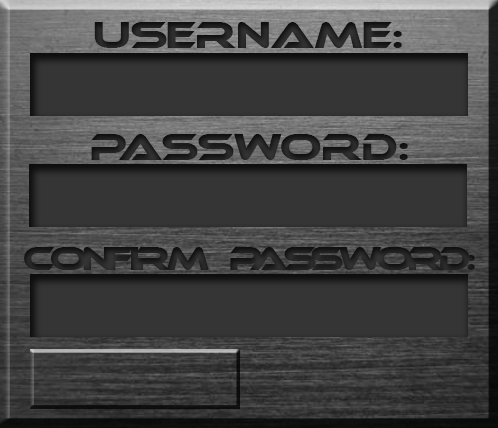
<style>
.page{position:relative;width:498px;height:428px;background:#353535}
.page>*{position:absolute;margin:0}
.t1{font:36px "Ethnocentric";color:#353535}
.t2{font:36px "Ethnocentric";color:#202020}
.t3{font:32px "Ethnocentric";letter-spacing:-0.15em;color:#353535}
</style>
<div class="page">
<p class="t1" style="left:94px;top:22px;width:308px;height:26px">USERNAME:</p>
<p class="t2" style="left:91px;top:134px;width:317px;height:26px">PASSWORD:</p>
<p class="t3" style="left:24px;top:247px;width:451px;height:23px">Confirm   Password:</p>
</div>
